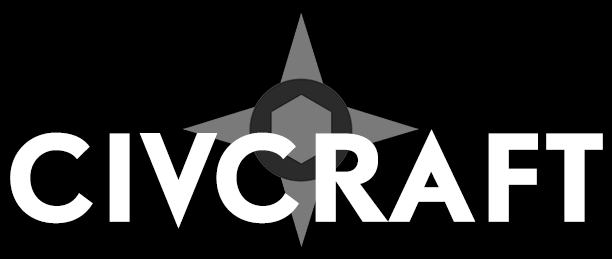
<style>
.page{position:relative;width:612px;height:259px;background:#000000}
.page>*{position:absolute;margin:0}
.t1{font:111.8px "DTLNobelT-Bold";color:#ffffff;text-transform:uppercase}
</style>
<div class="page">
<p class="t1" style="left:10px;top:129px;width:593px;height:100px">Civcraft</p>
</div>
